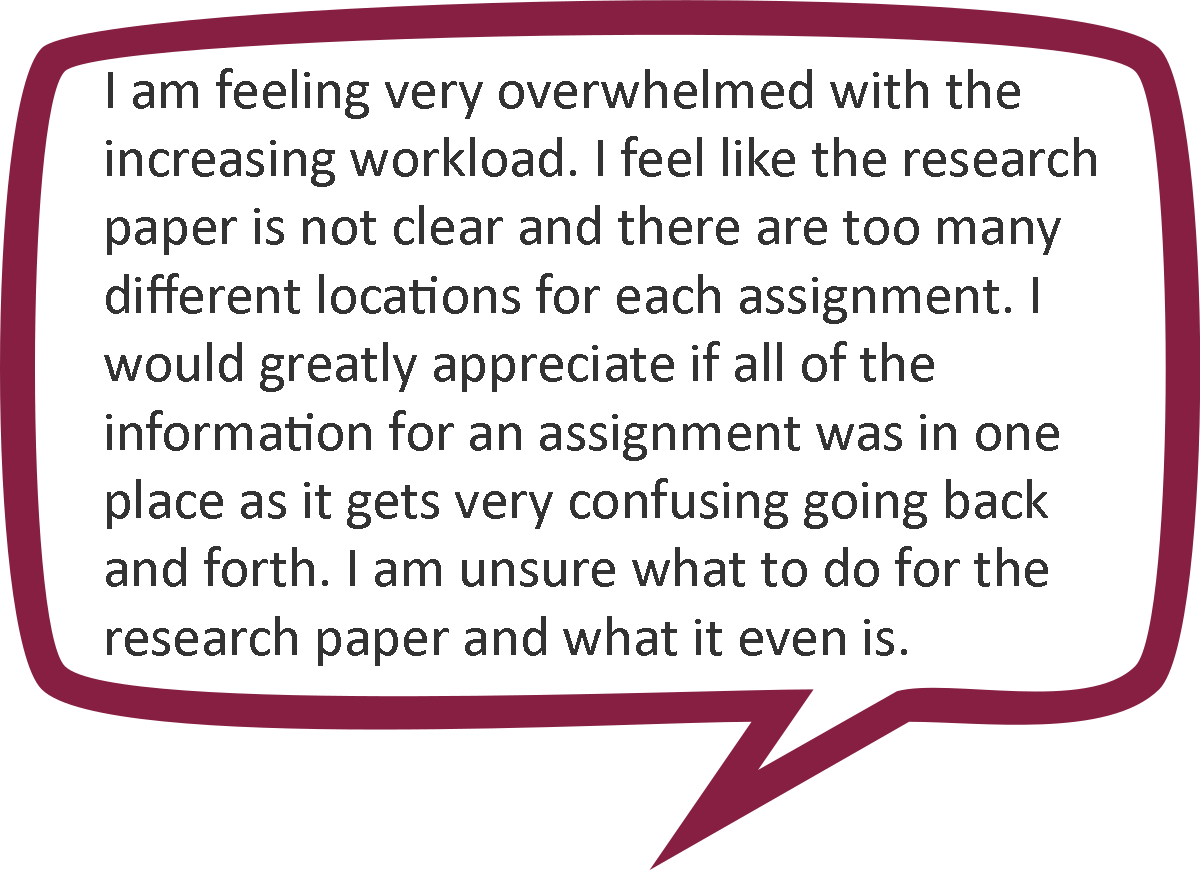
<style>
.page{position:relative;width:1200px;height:870px;background:#ffffff}
.page>*{position:absolute;margin:0}
.t1{font:57px "Calibri";color:#333333}
</style>
<div class="page">
<p class="t1" style="left:104px;top:68px;width:992px;height:598px">I am feeling very overwhelmed with the <br>increasing workload. I feel like the research <br>paper is not clear and there are too many <br>different locations for each assignment. I <br>would greatly appreciate if all of the <br>information for an assignment was in one <br>place as it gets very confusing going back <br>and forth. I am unsure what to do for the <br>research paper and what it even is.</p>
</div>
